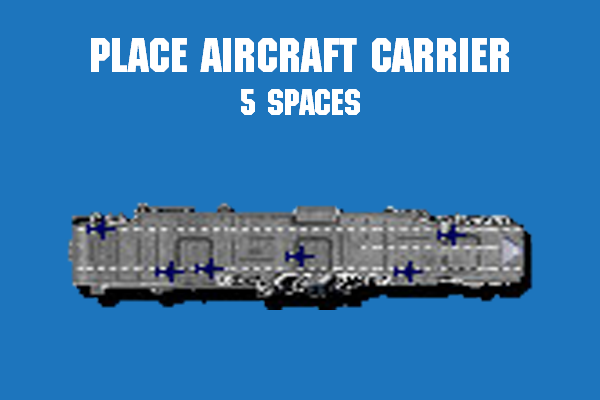
<style>
.page{position:relative;width:600px;height:400px;background:#1d75bd}
.page>*{position:absolute;margin:0}
.t1{font:48px "MachineStd";color:#ffffff}
.t2{font:36px "MachineStd";color:#ffffff}
</style>
<div class="page">
<p class="t1" style="left:91px;top:38px;width:418px;height:77px;text-align:center">Place Aircraft Carrier<br><span class="t2">5 spaces</span></p>
<p class="t1" style="left:91px;top:38px;width:418px;height:77px;text-align:center">Place Aircraft Carrier<br><span class="t2">5 spaces</span></p>
</div>
